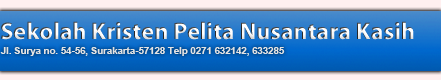
<style>
.page{position:relative;width:441px;height:80px}
.page>*{position:absolute;margin:0}
.t1{font:24.1px "MyriadPro-Bold"}
.t2{font:9.6px "Arial-BoldMT";color:#e3e3e3}
</style>
<div class="page">
<p class="t1" style="left:1px;top:21px;width:413px;height:19px">Sekolah Kristen Pelita Nusantara Kasih</p>
<p class="t2" style="left:0px;top:47px;width:285px;height:9px">Jl. Surya no. 54-56, Surakarta-57128 Telp 0271 632142, 633285</p>
</div>
